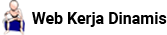
<style>
.page{position:relative;width:167px;height:35px;background:#ffffff}
.page>*{position:absolute;margin:0}
.t1{font:16px "Roboto-Bold";color:#000000}
</style>
<div class="page">
<p class="t1" style="left:32px;top:12px;width:135px;height:15px">Web Kerja Dinamis</p>
</div>
